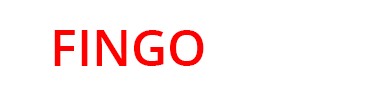
<style>
.page{position:relative;width:372px;height:102px;background:#ffffff}
.page>*{position:absolute;margin:0}
.t1{font:50px "OpenSans-Semibold";color:#ff0000}
.t2{font:50px "OpenSans-Semibold";color:#ffffff}
</style>
<div class="page">
<p class="t1" style="left:54px;top:30px;width:291px;height:36px">FINGO <span class="t2">PAGE</span></p>
</div>
